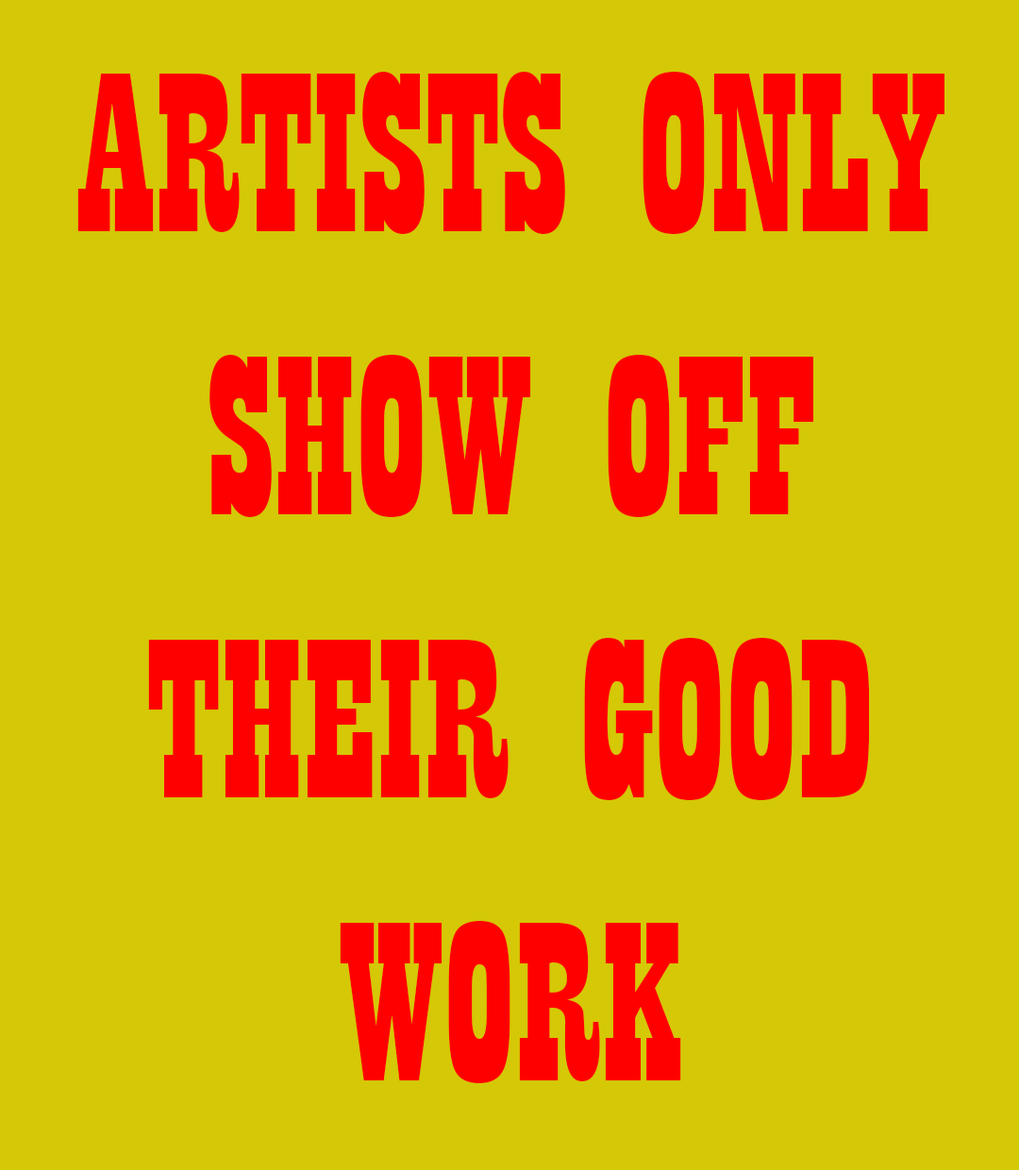
<style>
.page{position:relative;width:1019px;height:1170px;background:#d5c806}
.page>*{position:absolute;margin:0}
.t1{font:235.9px "Playbill";color:#ff0000}
</style>
<div class="page">
<p class="t1" style="left:77px;top:72px;width:868px;height:1011px;text-align:center">ARTISTS ONLY SHOW OFF   THEIR GOOD WORK</p>
</div>
